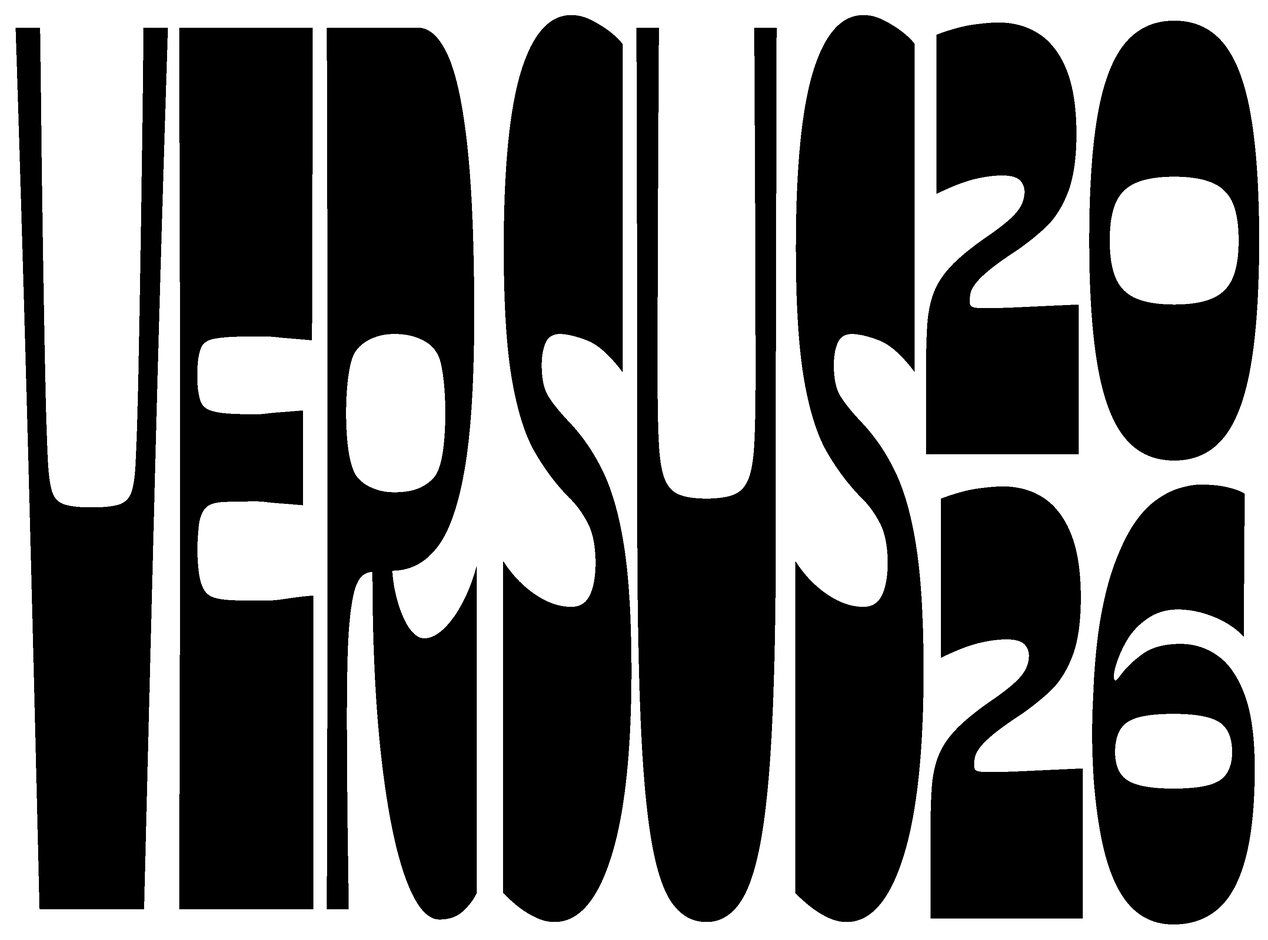
<style>
.page{position:relative;width:1268px;height:940px;background:#000000}
.page>*{position:absolute;margin:0}
.t1{font:1259.7px "Ojuju-ExtraBold";color:#000000;scale:0.21 1}
.t2{font:610.7px/464.1px "Ojuju-ExtraBold";color:#000000;scale:0.5 1}
</style>
<div class="page">
<p class="t1" style="left:16px;top:15px;width:907px;height:907px">VERSUS</p>
<p class="t2" style="left:926px;top:21px;width:333px;height:904px;text-align:center">20<br>26</p>
</div>
